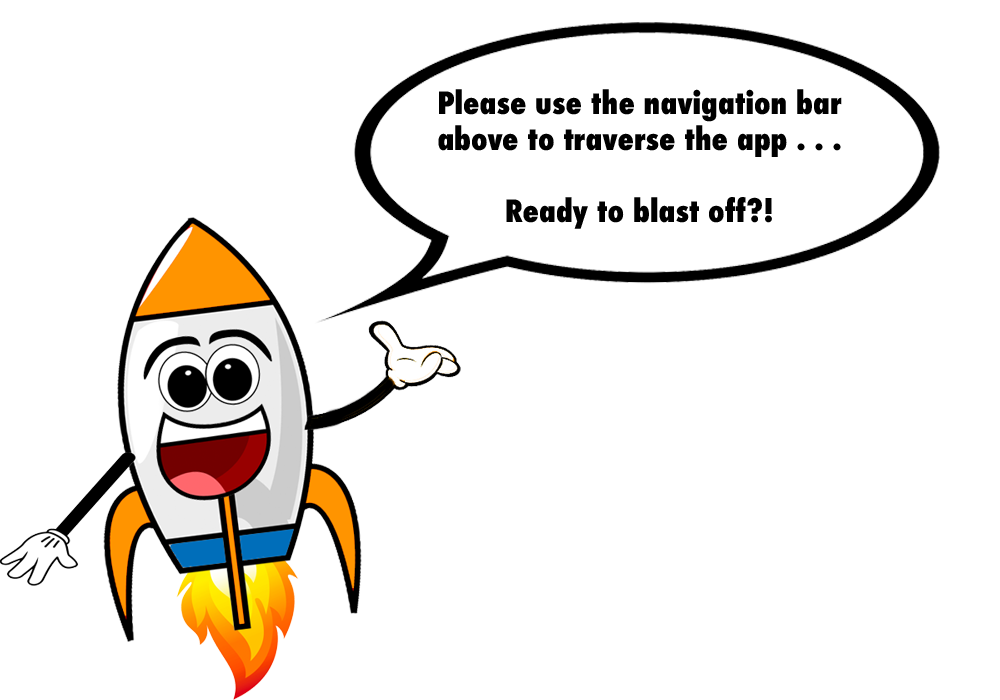
<style>
.page{position:relative;width:1000px;height:700px;background:#ffffff}
.page>*{position:absolute;margin:0}
.t1{font:30px "Futura-CondensedExtraBold";color:#000000}
</style>
<div class="page">
<p class="t1" style="left:438px;top:89px;width:404px;height:140px;text-align:center">Please use the navigation bar above to traverse the app . . .<br><br>Ready to blast off?!</p>
</div>
